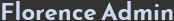
<style>
.page{position:relative;width:174px;height:21px;background:#333333}
.page>*{position:absolute;margin:0}
.t1{font:24px "JosefinSans-Bold";color:#cdd8ec}
</style>
<div class="page">
<p class="t1" style="left:2px;top:1px;width:94px;height:19px">Florence</p>
<p class="t1" style="left:101px;top:1px;width:72px;height:19px">Admin</p>
</div>
